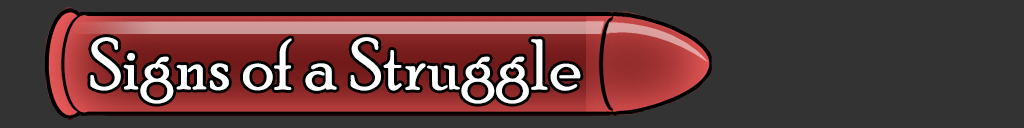
<style>
.page{position:relative;width:1024px;height:128px;background:#333333}
.page>*{position:absolute;margin:0}
.t1{font:72px "PoorRichard-Regular";color:#ffffff}
</style>
<div class="page">
<p class="t1" style="left:90px;top:37px;width:491px;height:67px">Signs of a Struggle</p>
</div>
